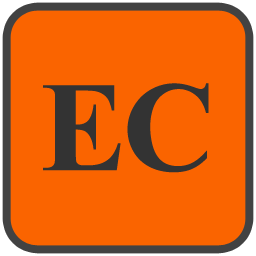
<style>
.page{position:relative;width:256px;height:256px;background:#fa6400}
.page>*{position:absolute;margin:0}
.t1{font:128px "TimesNewRomanPS-BoldMT";letter-spacing:-0.025em;color:#333333}
</style>
<div class="page">
<p class="t1" style="left:43px;top:83px;width:166px;height:90px">EC</p>
</div>
